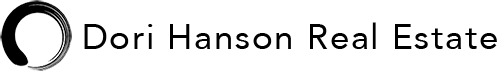
<style>
.page{position:relative;width:500px;height:72px;background:#ffffff}
.page>*{position:absolute;margin:0}
.t1{font:34.9px "Avenir-Roman";letter-spacing:0.05em;color:#000000}
</style>
<div class="page">
<p class="t1" style="left:84px;top:22px;width:413px;height:27px">Dori Hanson Real Estate</p>
</div>
